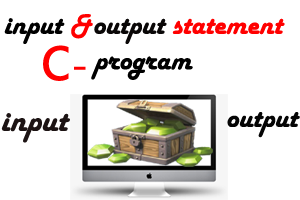
<style>
.page{position:relative;width:300px;height:200px;background:#ffffff}
.page>*{position:absolute;margin:0}
.t1{font:29.6px "HarlowSolid";color:#ff0000}
.t2{font:29.6px "HarlowSolid";color:#000000}
.t3{font:29.6px "HarlowSolid";color:#0a0707}
.t4{font:67.1px "MicrosoftTaiLe";color:#ff0000}
.t5{font:42.1px "MicrosoftTaiLe";color:#ff0000}
.t6{font:33.8px "HarlowSolid";color:#1d1414}
.t7{font:29.6px "HarlowSolid";color:#050505}
</style>
<div class="page">
<p class="t1" style="left:4px;top:14px;width:281px;height:66px;text-align:center"><span class="t2">input </span>&amp;<span class="t3">output </span>statement <span class="t2">program</span></p>
<p class="t4" style="left:43px;top:45px;width:43px;height:36px">c<span class="t5">-</span></p>
<p class="t6" style="left:1px;top:113px;width:69px;height:30px">input</p>
<p class="t7" style="left:227px;top:112px;width:73px;height:26px">output</p>
</div>
